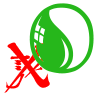
<style>
.page{position:relative;width:96px;height:96px;background:#ffffff}
.page>*{position:absolute;margin:0}
.t1{font:124.2px "KingthingsInkydinky-";color:#26b71b}
.t2{font:52.6px "KingthingsConundrum";color:#ff0000}
</style>
<div class="page">
<p class="t1" style="left:29px;top:3px;width:65px;height:71px">o</p>
<p class="t2" style="left:4px;top:42px;width:46px;height:51px">X</p>
</div>
